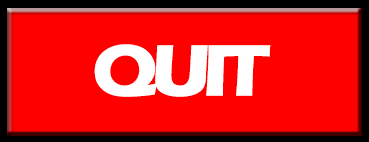
<style>
.page{position:relative;width:369px;height:142px;background:#ff0000}
.page>*{position:absolute;margin:0}
.t1{font:130px "ErasITC-Bold";letter-spacing:-0.1em;color:#ffffff}
.t2{font:48px "ErasITC-Bold";letter-spacing:-0.1em;color:#ffffff}
</style>
<div class="page">
<p class="t1" style="left:94px;top:44px;width:177px;height:53px"><span class="t2"><br><br><br><br><br><br><br><br><br><br><br></span><br><br><br><br><br>QUIT</p>
</div>
